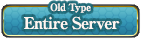
<style>
.page{position:relative;width:141px;height:39px}
.page>*{position:absolute;margin:0}
.t1{font:10px "RyuminPro-ExBold";letter-spacing:-0.04em;color:#fff6f1}
.t2{font:16px "RyuminPro-ExBold";letter-spacing:-0.04em;color:#fff6f1}
</style>
<div class="page">
<p class="t1" style="left:50px;top:3px;width:41px;height:10px">Old Type</p>
<p class="t2" style="left:24px;top:16px;width:96px;height:14px">Entire Server</p>
</div>
